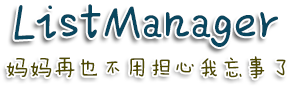
<style>
.page{position:relative;width:290px;height:87px;background:#ffffff}
.page>*{position:absolute;margin:0}
.t1{font:60px "FZMWJW--GB1-0";color:#0a475f}
.t2{font:24px "FZMWJW--GB1-0";color:#4f4a00}
</style>
<div class="page">
<p class="t1" style="left:14px;top:4px;width:264px;height:43px">ListManager</p>
<p class="t2" style="left:6px;top:56px;width:280px;height:23px">妈妈再也不用担心我忘事了</p>
</div>
